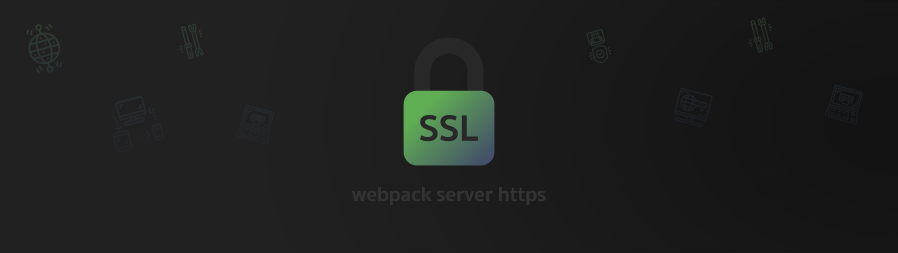
<style>
.page{position:relative;width:898px;height:253px;background:#212121}
.page>*{position:absolute;margin:0}
.t1{font:20.7px "SukhumvitSet-Bold";color:#333333}
</style>
<div class="page">
<p class="t1" style="left:352px;top:187px;width:194px;height:18px">webpack server https</p>
</div>
